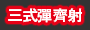
<style>
.page{position:relative;width:90px;height:30px;background:#333333}
.page>*{position:absolute;margin:0}
.t1{font:15px "GothicMB101Pro-DeBold";color:#ffffff}
</style>
<div class="page">
<p class="t1" style="left:8px;top:8px;width:74px;height:15px">三式彈齊射</p>
</div>
